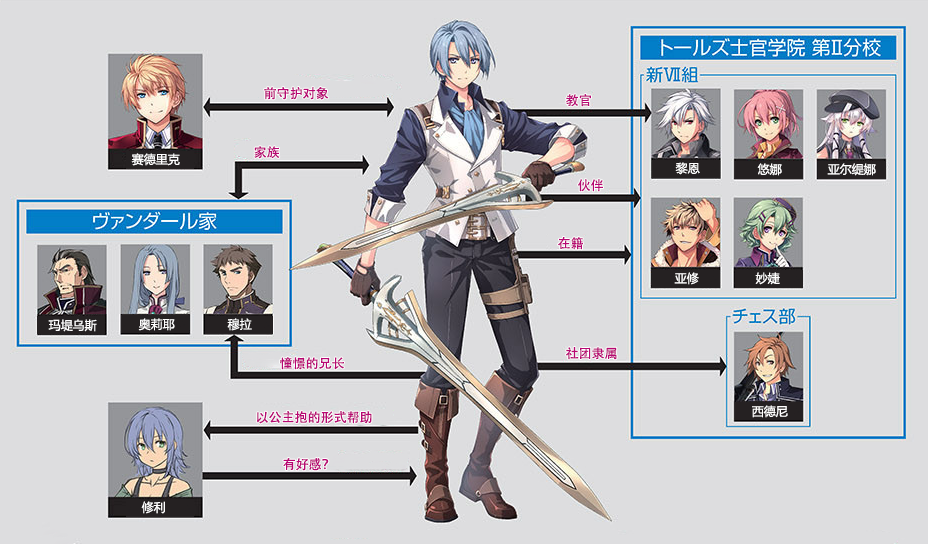
<style>
.page{position:relative;width:928px;height:544px;background:#dddddf}
.page>*{position:absolute;margin:0}
.t1{font:13px "AdobeHeitiStd-Regular";color:#b70773}
.t2{font:12px "MicrosoftYaHei";color:#ffffff}
</style>
<div class="page">
<p class="t1" style="left:264px;top:87px;width:65px;height:13px">前守护对象</p>
<p class="t1" style="left:566px;top:94px;width:25px;height:13px">教官</p>
<p class="t1" style="left:254px;top:146px;width:26px;height:13px">家族</p>
<p class="t2" style="left:131px;top:153px;width:49px;height:13px">赛德里克</p>
<p class="t2" style="left:675px;top:162px;width:25px;height:13px">黎恩</p>
<p class="t2" style="left:757px;top:163px;width:25px;height:13px">悠娜</p>
<p class="t2" style="left:827px;top:163px;width:49px;height:13px">亚尔缇娜</p>
<p class="t1" style="left:578px;top:179px;width:25px;height:13px">伙伴</p>
<p class="t1" style="left:558px;top:237px;width:25px;height:13px">在籍</p>
<p class="t2" style="left:674px;top:272px;width:25px;height:13px">亚修</p>
<p class="t2" style="left:755px;top:272px;width:25px;height:13px">妙婕</p>
<p class="t2" style="left:138px;top:318px;width:37px;height:13px">奥莉耶</p>
<p class="t2" style="left:227px;top:318px;width:25px;height:13px">穆拉</p>
<p class="t2" style="left:48px;top:319px;width:49px;height:13px">玛堤乌斯</p>
<p class="t1" style="left:566px;top:347px;width:51px;height:13px">社团隶属</p>
<p class="t1" style="left:280px;top:357px;width:64px;height:13px">憧憬的兄长</p>
<p class="t1" style="left:256px;top:411px;width:116px;height:13px">以公主抱的形式帮助</p>
<p class="t2" style="left:752px;top:405px;width:36px;height:13px">西德尼</p>
<p class="t1" style="left:283px;top:458px;width:46px;height:13px">有好感？</p>
<p class="t2" style="left:141px;top:501px;width:24px;height:13px">修利</p>
</div>
